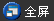
<style>
.page{position:relative;width:54px;height:21px;background:#333333}
.page>*{position:absolute;margin:0}
.t1{font:12px "SimSun";letter-spacing:0.1em;color:#ffffff}
</style>
<div class="page">
<p class="t1" style="left:25px;top:6px;width:24px;height:11px">全屏</p>
</div>
